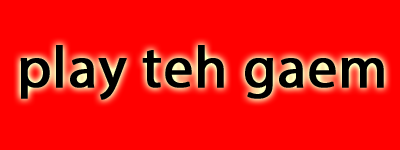
<style>
.page{position:relative;width:400px;height:150px;background:#ff0000}
.page>*{position:absolute;margin:0}
.t1{font:58px "MyriadPro-Regular";letter-spacing:0.01em;color:#000000;font-weight:bold}
</style>
<div class="page">
<p class="t1" style="left:20px;top:45px;width:364px;height:55px">play teh gaem</p>
</div>
